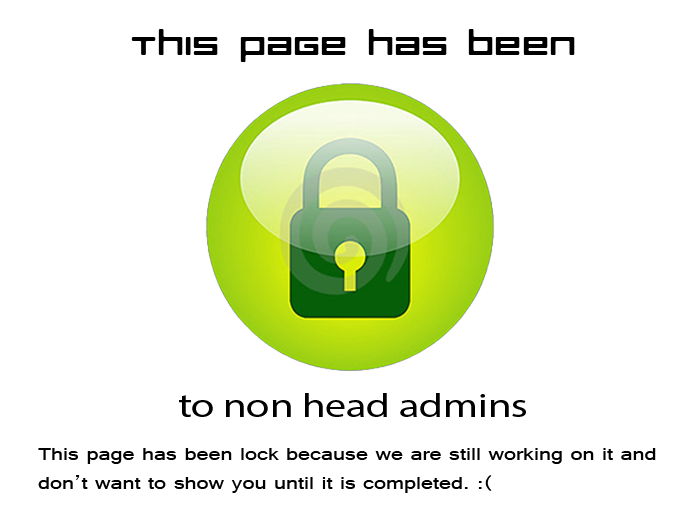
<style>
.page{position:relative;width:700px;height:525px;background:#ffffff}
.page>*{position:absolute;margin:0}
.t1{font:33.6px "RazerRegular";color:#000000;scale:1.25 1}
.t2{font:19.2px "Raavi";color:#000000;scale:1.25 1}
</style>
<div class="page">
<p class="t1" style="left:131px;top:29px;width:444px;height:33px">This page has been</p>
<p class="t1" style="left:179px;top:393px;width:347px;height:24px">to non head admins</p>
<p class="t2" style="left:38px;top:448px;width:618px;height:45px">This page has been lock because we are still working on it and<br>don’t want to show you until it is completed. :(</p>
</div>
